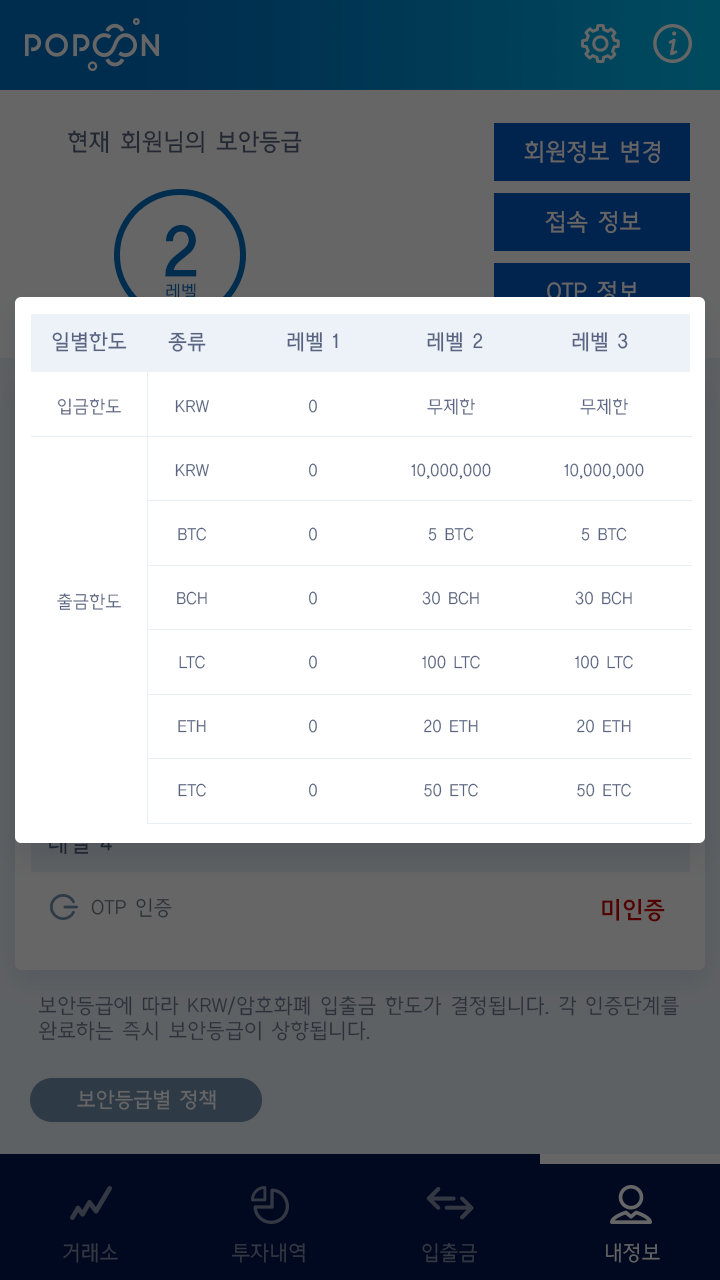
<style>
.page{position:relative;width:720px;height:1280px;background:#ffffff}
.page>*{position:absolute;margin:0}
.t1{font:24px "CreGoM";color:#232834}
.t2{font:24px "CreGoM";color:#666666}
.t3{font:69px "CreGoB";color:#002d4e}
.t4{font:18px "CreGoL";color:#002d4e}
.t5{font:21px "CreGoM";color:#586481}
.t6{font:18px "CreGoL";color:#586481}
.t7{font:18px/64px "CreGoL";color:#586481}
.t8{font:18px/64px "CreGoL"}
.t9{font:21px "CreGoL";color:#2c3039}
.t10{font:24px "CreGoB";color:#520000}
.t11{font:21px "CreGoL";color:#2c313b}
.t12{font:21px "CreGoM";color:#666666}
.t13{font:21px "CreGoL";color:#333843}
.t14{font:21px "CreGoL";color:#666666}
</style>
<div class="page">
<p class="t1" style="left:68px;top:130px;width:234px;height:24px">현재 회원님의 보안등급</p>
<p class="t2" style="left:524px;top:140px;width:136px;height:24px">회원정보 변경</p>
<p class="t2" style="left:545px;top:210px;width:96px;height:24px">접속 정보</p>
<p class="t3" style="left:165px;top:225px;width:32px;height:52px">2</p>
<p class="t4" style="left:166px;top:283px;width:30px;height:17px">레벨</p>
<p class="t5" style="left:52px;top:331px;width:75px;height:21px">일별한도</p>
<p class="t5" style="left:168px;top:332px;width:38px;height:20px">종류</p>
<p class="t5" style="left:287px;top:332px;width:51px;height:20px">레벨 1</p>
<p class="t5" style="left:427px;top:332px;width:56px;height:20px">레벨 2</p>
<p class="t5" style="left:572px;top:332px;width:56px;height:20px">레벨 3</p>
<p class="t6" style="left:58px;top:398px;width:63px;height:17px">입금한도</p>
<p class="t7" style="left:175px;top:400px;width:34px;height:397px;text-align:center">KRW<br>KRW<br>BTC<br>BCH<br>LTC<br>ETH<br>ETC</p>
<p class="t8" style="left:309px;top:399px;width:8px;height:398px;text-align:center">0<br>0<br>0<br>0<br>0<br>0<br>0</p>
<p class="t7" style="left:411px;top:398px;width:80px;height:399px;text-align:center">무제한<br>10,000,000<br>5 BTC<br>30 BCH<br>100 LTC<br>20 ETH<br>50 ETC</p>
<p class="t7" style="left:564px;top:398px;width:80px;height:399px;text-align:center">무제한<br>10,000,000<br>5 BTC<br>30 BCH<br>100 LTC<br>20 ETH<br>50 ETC</p>
<p class="t6" style="left:57px;top:593px;width:64px;height:17px">출금한도</p>
<p class="t9" style="left:91px;top:898px;width:81px;height:20px">OTP 인증</p>
<p class="t10" style="left:602px;top:899px;width:63px;height:23px">미인증</p>
<p class="t11" style="left:38px;top:996px;width:641px;height:45px">보안등급에 따라 KRW/암호화폐 입출금 한도가 결정됩니다. 각 인증단계를<br>완료하는 즉시 보안등급이 상향됩니다.</p>
<p class="t12" style="left:77px;top:1090px;width:139px;height:20px">보안등급별 정책</p>
<p class="t13" style="left:63px;top:1243px;width:55px;height:20px">거래소</p>
<p class="t13" style="left:232px;top:1243px;width:73px;height:20px">투자내역</p>
<p class="t13" style="left:422px;top:1243px;width:55px;height:20px">입출금</p>
<p class="t14" style="left:606px;top:1243px;width:54px;height:20px">내정보</p>
</div>
